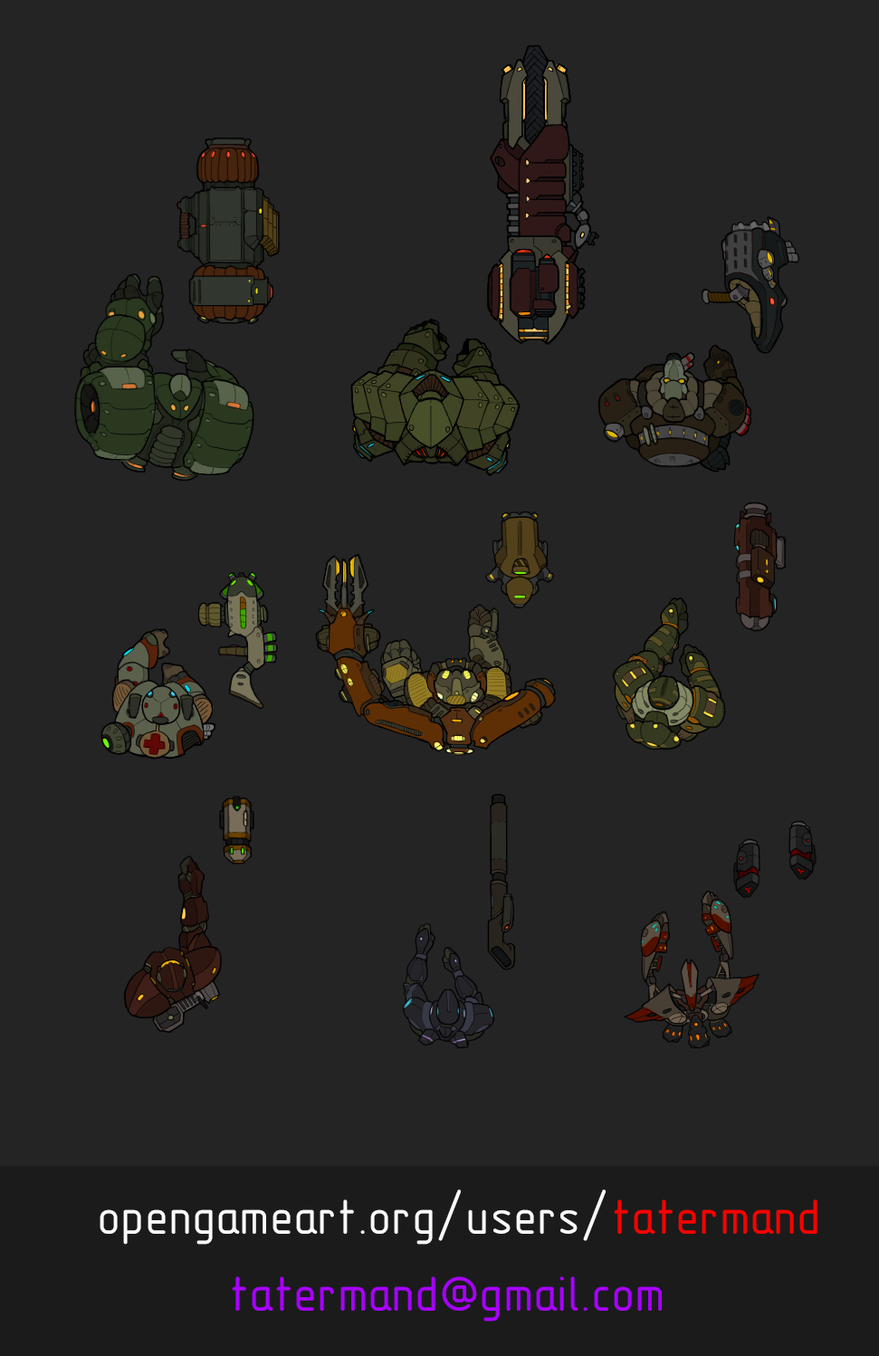
<style>
.page{position:relative;width:879px;height:1356px;background:#242424}
.page>*{position:absolute;margin:0}
.t1{font:49.5px "GOST-2.304-81typeB";color:#fafafa}
.t2{font:49.5px "GOST-2.304-81typeB";color:#fa0000}
.t3{font:49.5px "GOST-2.304-81typeB";color:#a800ff}
</style>
<div class="page">
<p class="t1" style="left:100px;top:1190px;width:718px;height:55px">opengameart.org/users/<span class="t2">tatermand</span></p>
<p class="t3" style="left:232px;top:1277px;width:430px;height:45px">tatermand@gmail.com</p>
</div>
